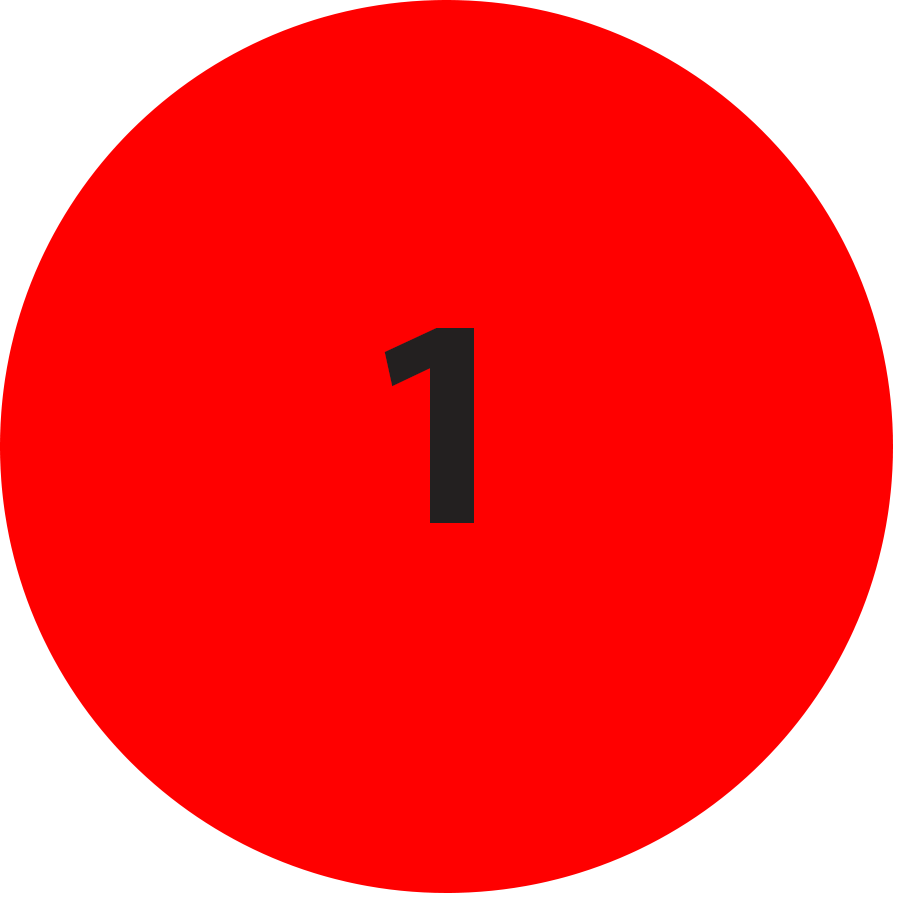
<style>
.page{position:relative;width:900px;height:900px;background:#ff0000}
.page>*{position:absolute;margin:0}
.t1{font:300px "MyriadPro-Bold";color:#232020}
</style>
<div class="page">
<p class="t1" style="left:384px;top:328px;width:90px;height:195px">1</p>
</div>
